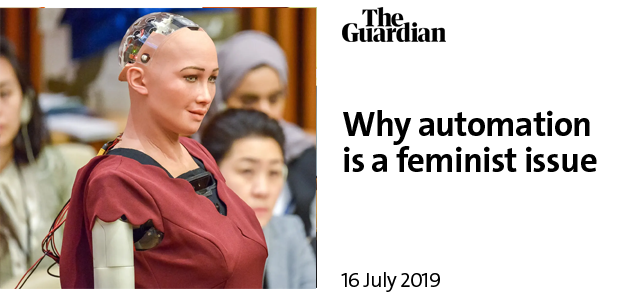
<style>
.page{position:relative;width:633px;height:300px;background:#ffffff}
.page>*{position:absolute;margin:0}
.t1{font:35px/36px "V&ATheSansC6s-Bold";letter-spacing:-0.02em;color:#000000}
.t2{font:20.8px "V&ATheSansC6s-SemiLight";letter-spacing:-0.02em;color:#000000}
</style>
<div class="page">
<p class="t1" style="left:343px;top:110px;width:254px;height:62px">Why automation<br>is a feminist issue</p>
<p class="t2" style="left:341px;top:272px;width:99px;height:20px">16 July 2019</p>
</div>
